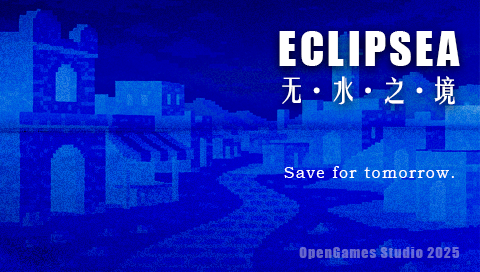
<style>
.page{position:relative;width:480px;height:272px}
.page>*{position:absolute;margin:0}
.t1{font:44.2px "Impact";letter-spacing:0.075em;color:#ffffff}
.t2{font:28.6px "FZYTK--GBK1-0";letter-spacing:-0.1em;color:#ffffff}
.t3{font:16.4px "BookmanOldStyle";letter-spacing:0.075em;color:#ffffff}
.t4{font:13.9px "Impact";letter-spacing:0.075em;color:#6767d1}
</style>
<div class="page">
<p class="t1" style="left:279px;top:31px;width:181px;height:35px">ECLIPSEA</p>
<p class="t2" style="left:282px;top:76px;width:173px;height:29px">无·水·之·境</p>
<p class="t3" style="left:284px;top:166px;width:170px;height:12px">Save for tomorrow.</p>
<p class="t4" style="left:299px;top:247px;width:161px;height:12px">OpenGames Studio 2025</p>
</div>
